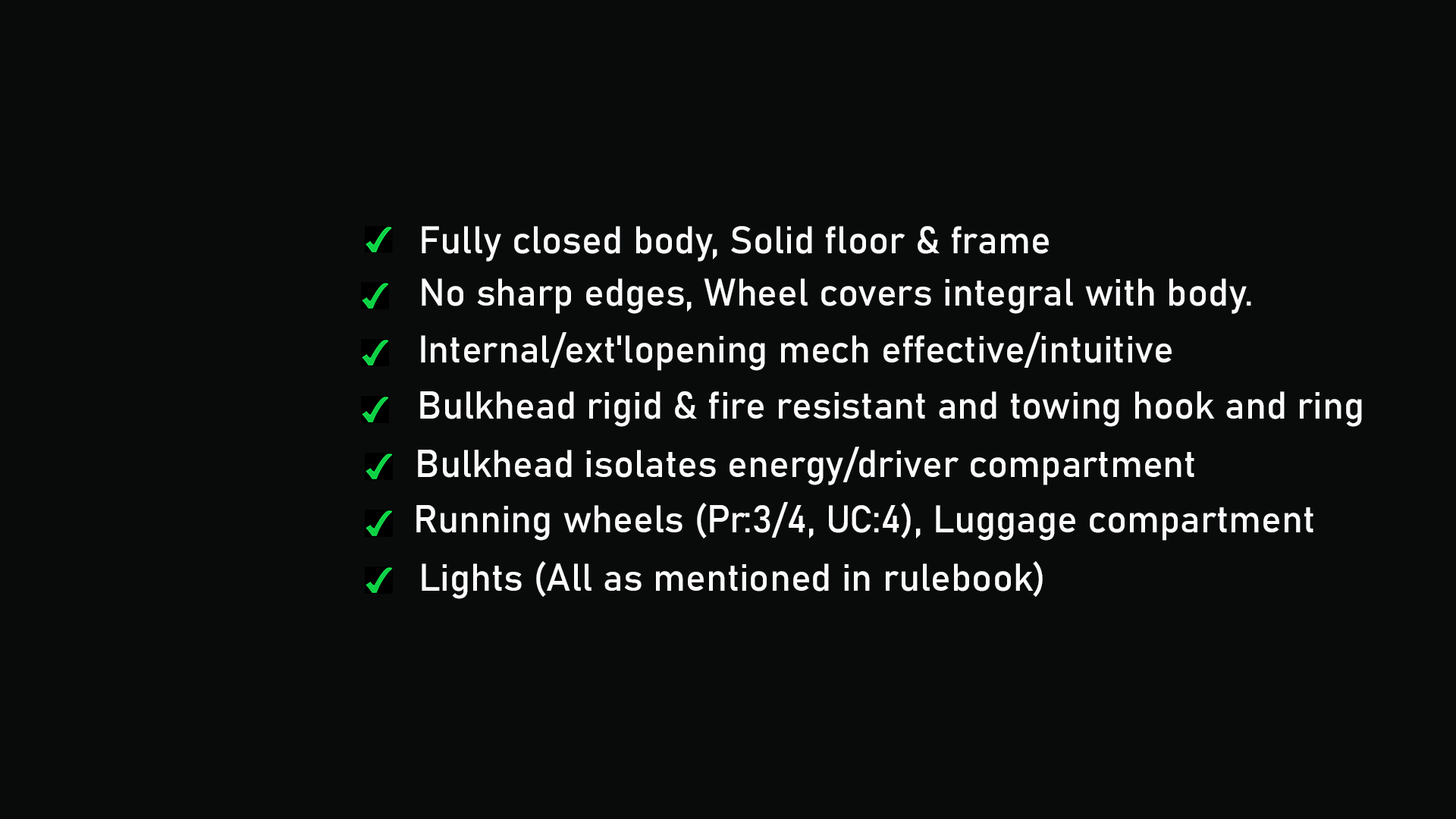
<style>
.page{position:relative;width:1456px;height:819px;background:#090b0b}
.page>*{position:absolute;margin:0}
.t1{font:37.9px "Bahnschrift";color:#fbfbfd}
</style>
<div class="page">
<p class="t1" style="left:422px;top:226px;width:627px;height:36px">Fully closed body, Solid floor &amp; frame</p>
<p class="t1" style="left:422px;top:278px;width:829px;height:36px">No sharp edges, Wheel covers integral with body.</p>
<p class="t1" style="left:421px;top:332px;width:751px;height:39px">Internal/ext'lopening mech effective/intuitive</p>
<p class="t1" style="left:420px;top:391px;width:942px;height:36px">Bulkhead rigid &amp; fire resistant and towing hook and ring</p>
<p class="t1" style="left:418px;top:447px;width:776px;height:38px">Bulkhead isolates energy/driver compartment</p>
<p class="t1" style="left:416px;top:502px;width:897px;height:39px">Running wheels (Pr:3/4, UC:4), Luggage compartment</p>
<p class="t1" style="left:422px;top:561px;width:621px;height:38px">Lights (All as mentioned in rulebook)</p>
</div>
